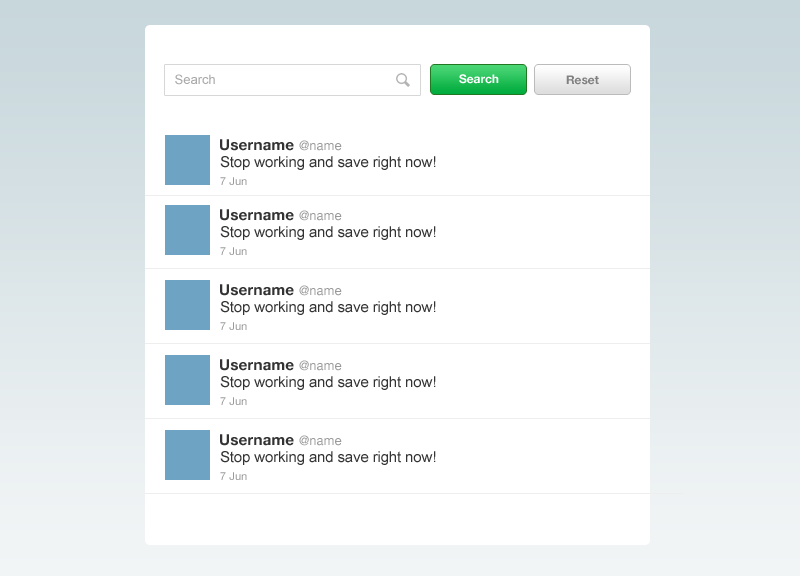
<style>
.page{position:relative;width:800px;height:576px;background:#ffffff}
.page>*{position:absolute;margin:0}
.t1{font:13px "ArialMT";color:#a9a9a9}
.t2{font:12px "HelveticaNeue-Bold";letter-spacing:-0.005em;color:#ffffff}
.t3{font:12px "HelveticaNeue-Bold";letter-spacing:-0.005em;color:#828181}
.t4{font:15px "HelveticaNeue-Bold";letter-spacing:0.015em;color:#333333}
.t5{font:13px "HelveticaNeue";color:#999999}
.t6{font:15px "ArialMT";letter-spacing:-0.01em;color:#333333}
.t7{font:11px "HelveticaNeue";color:#999999}
</style>
<div class="page">
<p class="t1" style="left:175px;top:74px;width:40px;height:11px">Search</p>
<p class="t2" style="left:459px;top:74px;width:40px;height:10px">Search</p>
<p class="t3" style="left:566px;top:75px;width:33px;height:10px">Reset</p>
<p class="t4" style="left:220px;top:139px;width:74px;height:12px">Username</p>
<p class="t5" style="left:299px;top:140px;width:43px;height:11px">@name</p>
<p class="t6" style="left:220px;top:156px;width:216px;height:14px">Stop working and save right now!</p>
<p class="t7" style="left:220px;top:177px;width:27px;height:8px">7 Jun</p>
<p class="t4" style="left:220px;top:209px;width:74px;height:12px">Username</p>
<p class="t5" style="left:299px;top:210px;width:43px;height:11px">@name</p>
<p class="t6" style="left:220px;top:226px;width:216px;height:14px">Stop working and save right now!</p>
<p class="t7" style="left:220px;top:247px;width:27px;height:8px">7 Jun</p>
<p class="t4" style="left:220px;top:284px;width:74px;height:12px">Username</p>
<p class="t5" style="left:299px;top:285px;width:43px;height:11px">@name</p>
<p class="t6" style="left:220px;top:301px;width:216px;height:14px">Stop working and save right now!</p>
<p class="t7" style="left:220px;top:322px;width:27px;height:8px">7 Jun</p>
<p class="t4" style="left:220px;top:359px;width:74px;height:12px">Username</p>
<p class="t5" style="left:299px;top:360px;width:43px;height:11px">@name</p>
<p class="t6" style="left:220px;top:376px;width:216px;height:14px">Stop working and save right now!</p>
<p class="t7" style="left:220px;top:397px;width:27px;height:8px">7 Jun</p>
<p class="t4" style="left:220px;top:434px;width:74px;height:12px">Username</p>
<p class="t5" style="left:299px;top:435px;width:43px;height:11px">@name</p>
<p class="t6" style="left:220px;top:451px;width:216px;height:14px">Stop working and save right now!</p>
<p class="t7" style="left:220px;top:472px;width:27px;height:8px">7 Jun</p>
</div>
